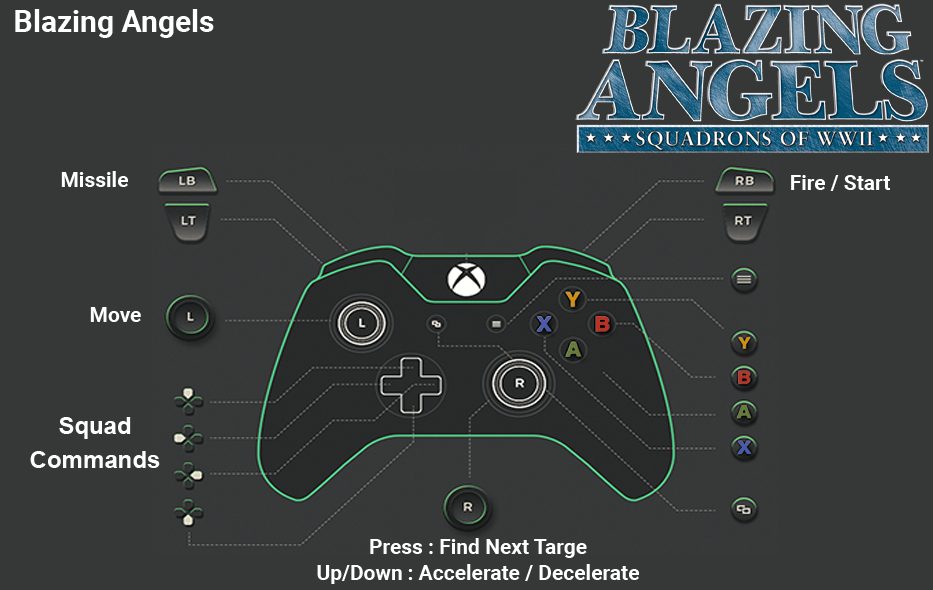
<style>
.page{position:relative;width:933px;height:590px;background:#363838}
.page>*{position:absolute;margin:0}
.t1{font:30px "Roboto-Bold";color:#ffffff}
.t2{font:21px "Roboto-Bold";color:#ffffff}
.t3{font:24px/34px "Arial-BoldMT";color:#fefefe}
.t4{font:21px/26px "Roboto-Bold";color:#ffffff}
</style>
<div class="page">
<p class="t1" style="left:15px;top:9px;width:199px;height:29px">Blazing Angels</p>
<p class="t2" style="left:61px;top:171px;width:67px;height:16px">Missile</p>
<p class="t2" style="left:791px;top:175px;width:99px;height:16px">Fire / Start</p>
<p class="t2" style="left:90px;top:307px;width:51px;height:15px">Move</p>
<p class="t3" style="left:30px;top:417px;width:130px;height:51px;text-align:center">Squad<br>Commands</p>
<p class="t4" style="left:317px;top:538px;width:322px;height:46px;text-align:center">Press : Find Next Targe<br>Up/Down : Accelerate / Decelerate</p>
</div>
